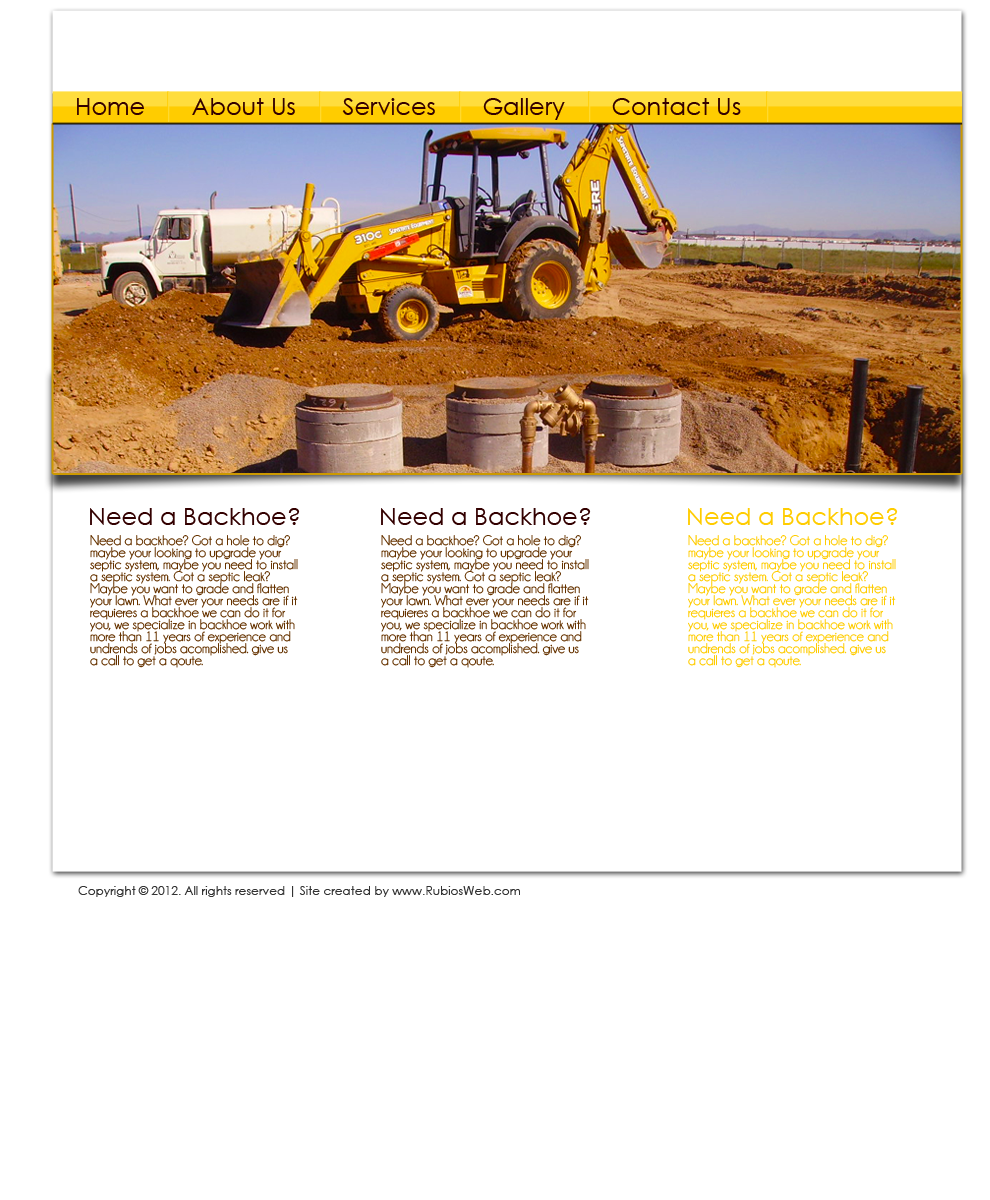
<style>
.page{position:relative;width:990px;height:1200px;background:#ffffff}
.page>*{position:absolute;margin:0}
.t1{font:24px "CenturyGothic";color:#330000}
.t2{font:24px "CenturyGothic";color:#ffcc00}
.t3{font:14px/12px "Champagne&Limousines";color:#663300}
.t4{font:14px/12px "Champagne&Limousines";color:#ffcc00}
.t5{font:12px "CenturyGothic";color:#333333}
</style>
<div class="page">
<p class="t1" style="left:77px;top:98px;width:664px;height:22px">Home       About Us       Services       Gallery       Contact Us</p>
<p class="t1" style="left:90px;top:508px;width:210px;height:17px">Need a Backhoe?</p>
<p class="t1" style="left:381px;top:508px;width:210px;height:17px">Need a Backhoe?</p>
<p class="t2" style="left:688px;top:508px;width:210px;height:17px">Need a Backhoe?</p>
<p class="t3" style="left:90px;top:535px;width:208px;height:133px">Need a backhoe? Got a hole to dig? maybe your looking to upgrade your septic system, maybe you need to install a septic system. Got a septic leak? Maybe you want to grade and flatten your lawn. What ever your needs are if it requieres a backhoe we can do it for you, we specialize in backhoe work with more than 11 years of experience and undrends of jobs acomplished. give us a call to get a qoute.</p>
<p class="t3" style="left:381px;top:535px;width:208px;height:133px">Need a backhoe? Got a hole to dig? maybe your looking to upgrade your septic system, maybe you need to install a septic system. Got a septic leak? Maybe you want to grade and flatten your lawn. What ever your needs are if it requieres a backhoe we can do it for you, we specialize in backhoe work with more than 11 years of experience and undrends of jobs acomplished. give us a call to get a qoute.</p>
<p class="t4" style="left:688px;top:535px;width:208px;height:133px">Need a backhoe? Got a hole to dig? maybe your looking to upgrade your septic system, maybe you need to install a septic system. Got a septic leak? Maybe you want to grade and flatten your lawn. What ever your needs are if it requieres a backhoe we can do it for you, we specialize in backhoe work with more than 11 years of experience and undrends of jobs acomplished. give us a call to get a qoute.</p>
<p class="t5" style="left:78px;top:886px;width:442px;height:11px">Copyright © 2012. All rights reserved | Site created by www.RubiosWeb.com</p>
</div>
